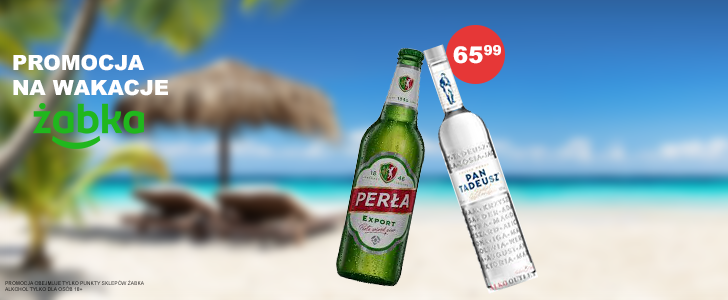
<style>
.page{position:relative;width:728px;height:300px}
.page>*{position:absolute;margin:0}
.t1{font:21px "Arial-Black";color:#ffffff}
.t2{font:23px "Arial-Black";color:#ffffff}
.t3{font:5px "ArialMT"}
</style>
<div class="page">
<p class="t1" style="left:13px;top:54px;width:155px;height:42px">PROMOCJA NA WAKACJE</p>
<p class="t2" style="left:453px;top:45px;width:48px;height:19px">6599</p>
<p class="t3" style="left:5px;top:280px;width:139px;height:11px">PROMOCJA OBEJMUJE TYLKO PUNKTY SKLEPÓW ŻABKA<br>ALKOHOL TYLKO DLA OSÓB 18+</p>
</div>
